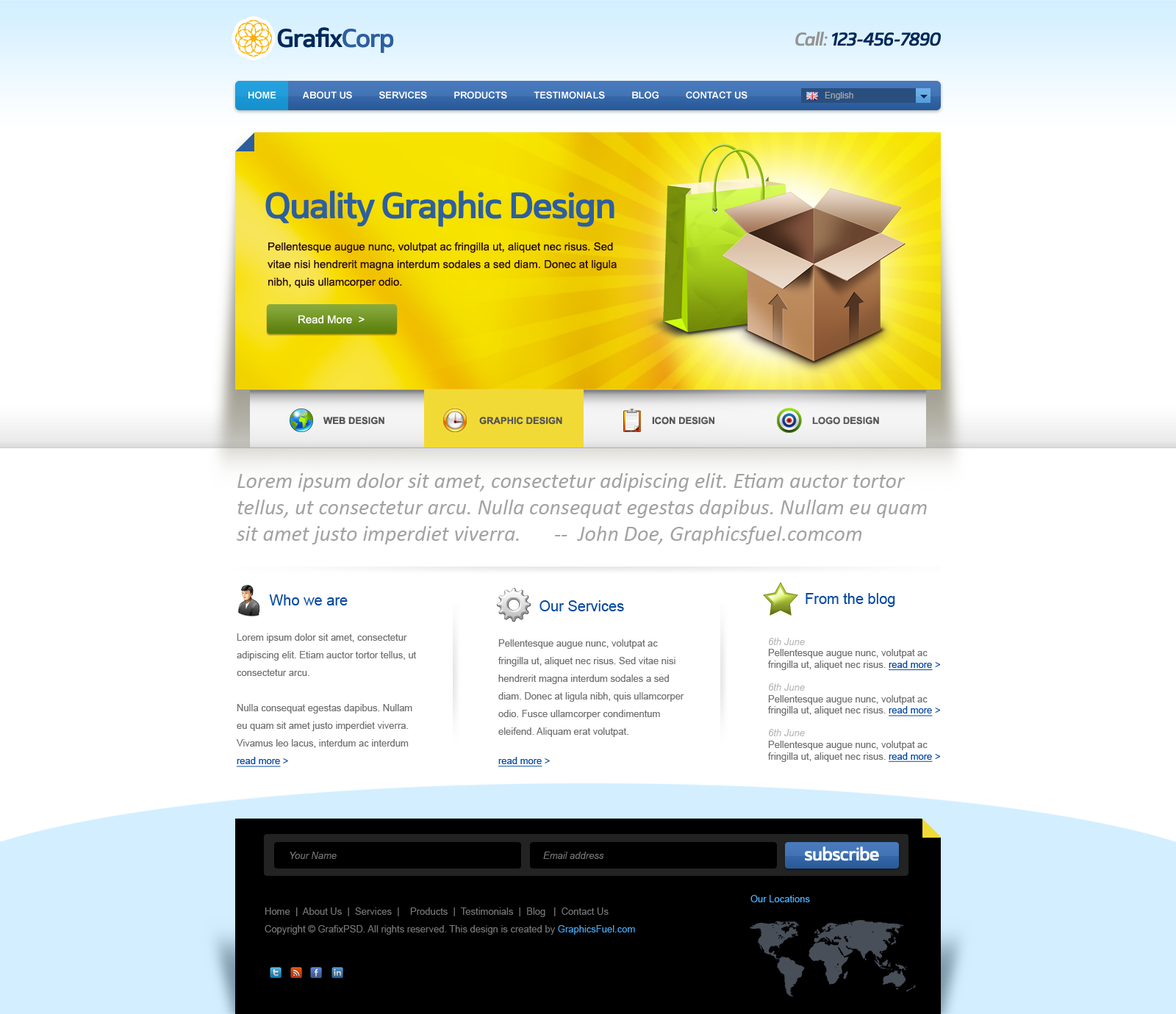
<style>
.page{position:relative;width:1176px;height:1014px;background:#ffffff}
.page>*{position:absolute;margin:0}
.t1{font:25.7px "Mentone-SemiBold";letter-spacing:-0.05em;color:#002859}
.t2{font:25.7px "Mentone-SemiBold";letter-spacing:-0.05em;color:#2d5f9f}
.t3{font:18.4px "Mentone-SemiBoldItalic";letter-spacing:-0.05em;color:#002859}
.t4{font:18.4px "Mentone-SemiBoldItalic";letter-spacing:-0.05em;color:#939393}
.t5{font:9.6px "Arial-BoldMT";color:#ffffff;text-transform:uppercase}
.t6{font:8.8px "ArialMT";color:#a9a9a9}
.t7{font:36.7px "Mentone-SemiBold";letter-spacing:-0.05em;color:#2d5f9f}
.t8{font:11px/17.6px "ArialMT";color:#2d1010}
.t9{font:11px "ArialMT";color:#ffffff}
.t10{font:9.6px "Arial-BoldMT";color:#555555;text-transform:uppercase}
.t11{font:22px "Calibri-Italic";color:#a3a3a3}
.t12{font:9.6px "ArialMT";color:#737373}
.t13{font:14.7px "ArialMT";color:#094aa1}
.t14{font:9.6px "Arial-ItalicMT";color:#b8b8b8}
.t15{font:9.6px "ArialMT";color:#094aa1;text-decoration:underline}
.t16{font:9.6px "ArialMT";color:#094aa1}
.t17{font:9.6px/17.6px "ArialMT";color:#737373}
.t18{font:14.7px/17.6px "ArialMT";color:#094aa1}
.t19{font:9.6px "Arial-ItalicMT";color:#737373}
.t20{font:18.4px "Mentone-SemiBold";letter-spacing:-0.05em;color:#ffffff}
.t21{font:9.6px "ArialMT";color:#4bb1ff}
.t22{font:9.6px/17.6px "ArialMT";color:#46a5ee}
</style>
<div class="page">
<p class="t1" style="left:277px;top:27px;width:117px;height:27px">Grafix<span class="t2">Corp</span></p>
<p class="t3" style="left:795px;top:32px;width:146px;height:14px"><span class="t4">Call:</span> 123-456-7890</p>
<p class="t5" style="left:248px;top:91px;width:499px;height:8px">Home          About Us          Services          Products          Testimonials          Blog          Contact Us</p>
<p class="t6" style="left:825px;top:92px;width:28px;height:8px">English</p>
<p class="t7" style="left:265px;top:190px;width:349px;height:37px">Quality Graphic Design</p>
<p class="t8" style="left:267px;top:242px;width:350px;height:46px">Pellentesque augue nunc, volutpat ac fringilla ut, aliquet nec risus. Sed vitae nisi hendrerit magna interdum sodales a sed diam. Donec at ligula nibh, quis ullamcorper odio.</p>
<p class="t9" style="left:298px;top:315px;width:67px;height:9px">Read More  &gt;</p>
<p class="t10" style="left:323px;top:417px;width:61px;height:8px">Web design</p>
<p class="t10" style="left:479px;top:417px;width:83px;height:8px">Graphic design</p>
<p class="t10" style="left:652px;top:417px;width:62px;height:8px">Icon design</p>
<p class="t10" style="left:812px;top:417px;width:67px;height:8px">Logo design</p>
<p class="t11" style="left:237px;top:473px;width:690px;height:72px">Lorem ipsum dolor sit amet, consectetur adipiscing elit. Etiam auctor tortor tellus, ut consectetur arcu. Nulla consequat egestas dapibus. Nullam eu quam sit amet justo imperdiet viverra.   --  John Doe, Graphicsfuel.comcom</p>
<p class="t12" style="left:768px;top:593px;width:172px;height:169px"><span class="t13">         From the blog<br><br><br></span><span class="t14">6th June<br></span>Pellentesque augue nunc, volutpat ac fringilla ut, aliquet nec risus. <span class="t15">read more</span><span class="t16"> &gt;<br><br></span><span class="t14">6th June<br></span>Pellentesque augue nunc, volutpat ac fringilla ut, aliquet nec risus. <span class="t15">read more</span><span class="t16"> &gt;<br><br></span><span class="t14">6th June<br></span>Pellentesque augue nunc, volutpat ac fringilla ut, aliquet nec risus. <span class="t15">read more</span><span class="t16"> &gt;</span></p>
<p class="t17" style="left:236px;top:595px;width:181px;height:172px"><span class="t18">        Who we are<br></span><br>Lorem ipsum dolor sit amet, consectetur adipiscing elit. Etiam auctor tortor tellus, ut consectetur arcu. <br><br>Nulla consequat egestas dapibus. Nullam eu quam sit amet justo imperdiet viverra. Vivamus leo lacus, interdum ac interdum <span class="t15">read more</span><span class="t16"> &gt;</span></p>
<p class="t17" style="left:498px;top:600px;width:186px;height:167px"><span class="t18">          Our Services<br><br></span>Pellentesque augue nunc, volutpat ac fringilla ut, aliquet nec risus. Sed vitae nisi hendrerit magna interdum sodales a sed diam. Donec at ligula nibh, quis ullamcorper odio. Fusce ullamcorper condimentum eleifend. Aliquam erat volutpat.<br><br><span class="t15">read more</span><span class="t16"> &gt;</span></p>
<p class="t19" style="left:290px;top:852px;width:47px;height:7px">Your Name</p>
<p class="t19" style="left:543px;top:852px;width:61px;height:7px">Email address</p>
<p class="t20" style="left:805px;top:847px;width:74px;height:14px">subscribe</p>
<p class="t21" style="left:750px;top:895px;width:60px;height:7px">Our Locations</p>
<p class="t12" style="left:265px;top:908px;width:370px;height:27px">Home  |  About Us  |  Services  |    Products  |  Testimonials  |  Blog   |  Contact Us     <br><span class="t17">Copyright © GrafixPSD. All rights reserved. This design is created by </span><span class="t22">GraphicsFuel.com</span></p>
</div>
